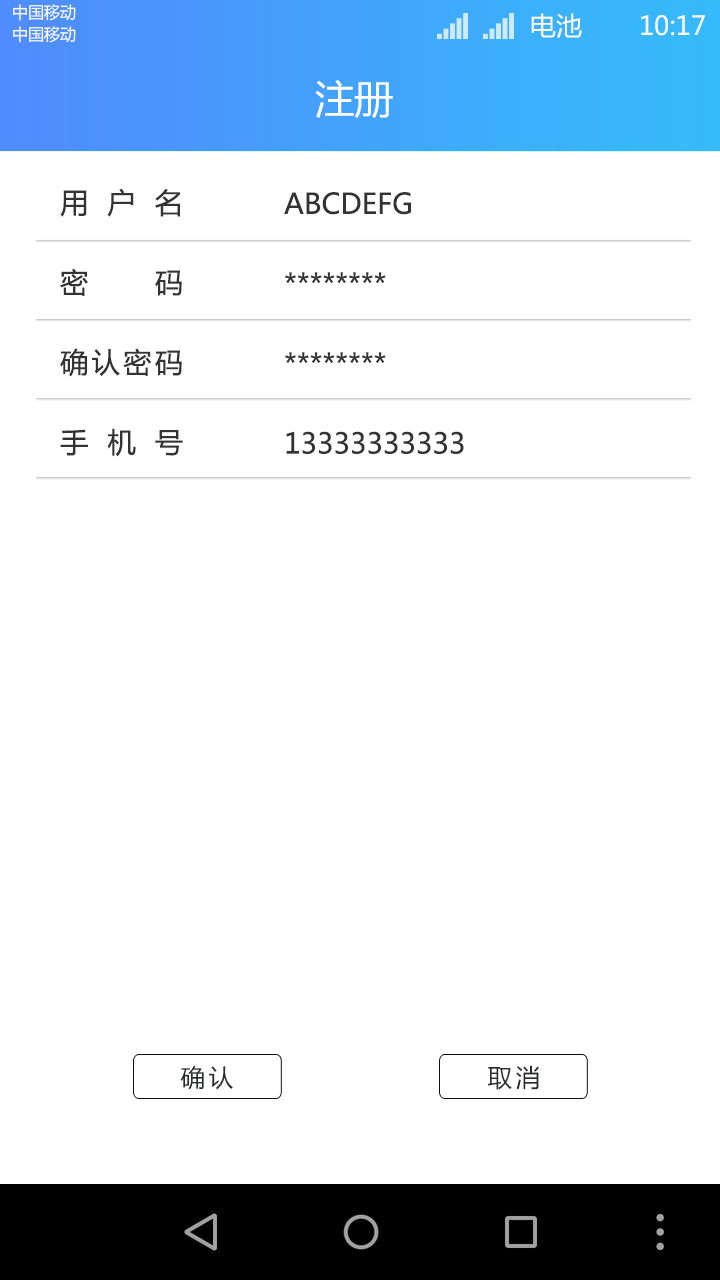
<style>
.page{position:relative;width:720px;height:1280px;background:#ffffff}
.page>*{position:absolute;margin:0}
.t1{font:16.2px "MicrosoftYaHei";color:#ffffff;text-transform:uppercase}
.t2{font:26.1px "MicrosoftYaHei";color:#ffffff;text-transform:uppercase}
.t3{font:39.5px "MicrosoftYaHei";color:#ffffff;text-transform:uppercase}
.t4{font:28.1px/79.9px "MicrosoftYaHei";color:#333333}
.t5{font:24.5px "MicrosoftYaHei";letter-spacing:0.15em;color:#2b2c2c}
</style>
<div class="page">
<p class="t1" style="left:13px;top:4px;width:63px;height:17px">中国移动</p>
<p class="t2" style="left:531px;top:13px;width:51px;height:25px">电池</p>
<p class="t2" style="left:641px;top:15px;width:64px;height:21px">10:17</p>
<p class="t1" style="left:13px;top:26px;width:63px;height:17px">中国移动</p>
<p class="t3" style="left:315px;top:80px;width:78px;height:39px">注册</p>
<p class="t4" style="left:60px;top:188px;width:123px;height:269px;text-align:justify">用户名<br>密码<br>确认密码<br>手机号</p>
<p class="t4" style="left:284px;top:192px;width:180px;height:262px">ABCDEFG<br>********<br>********<br>13333333333</p>
<p class="t5" style="left:180px;top:1065px;width:53px;height:25px">确认</p>
<p class="t5" style="left:487px;top:1065px;width:52px;height:25px">取消</p>
</div>
